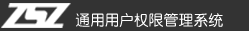
<style>
.page{position:relative;width:249px;height:31px;background:#333333}
.page>*{position:absolute;margin:0}
.t1{font:15px "ç»å¸ä¸­åç®-regular";letter-spacing:0.04em;color:#ffffff}
</style>
<div class="page">
<p class="t1" style="left:75px;top:13px;width:148px;height:14px">通用用户权限管理系统</p>
</div>
